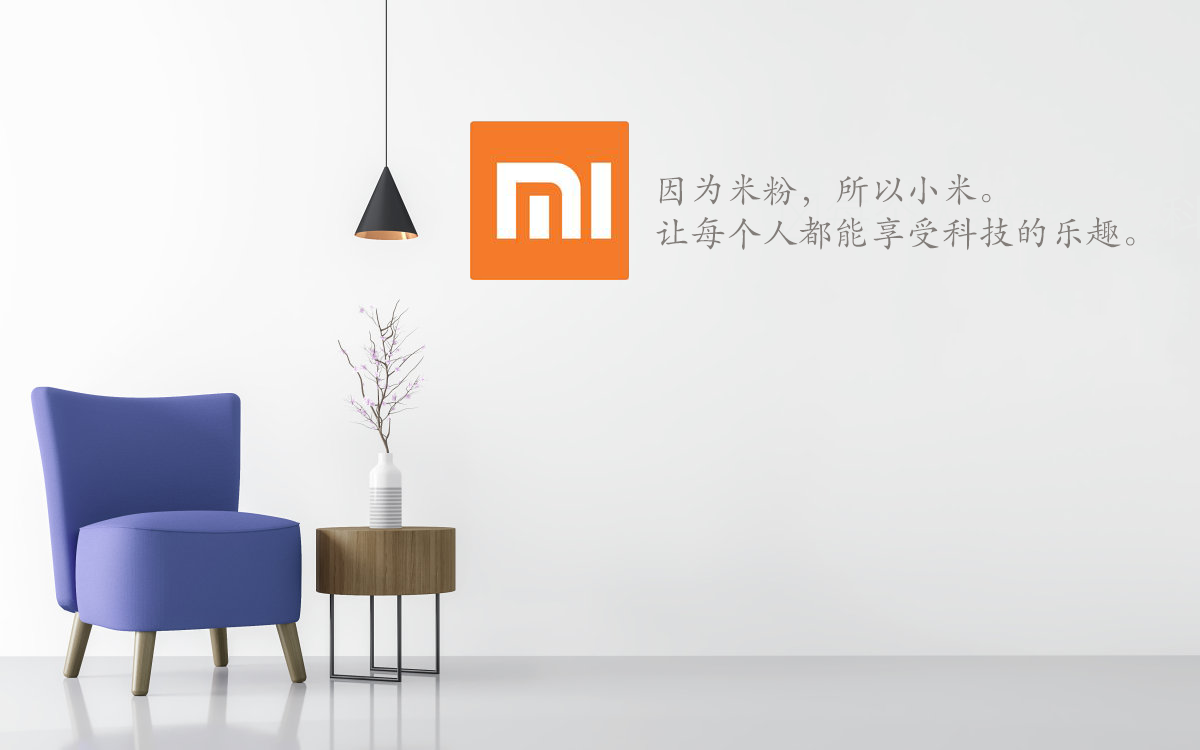
<style>
.page{position:relative;width:1200px;height:750px}
.page>*{position:absolute;margin:0}
.t1{font:36px "STKaiti";color:#827d79}
</style>
<div class="page">
<p class="t1" style="left:656px;top:174px;width:479px;height:77px">因为米粉，所以小米。<br>让每个人都能享受科技的乐趣。</p>
</div>
